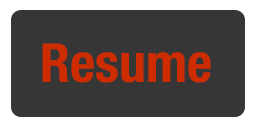
<style>
.page{position:relative;width:256px;height:128px;background:#363636}
.page>*{position:absolute;margin:0}
.t1{font:54px "HelveticaNeue-CondensedBold";color:#cd2b00}
</style>
<div class="page">
<p class="t1" style="left:42px;top:43px;width:169px;height:40px">Resume</p>
</div>
